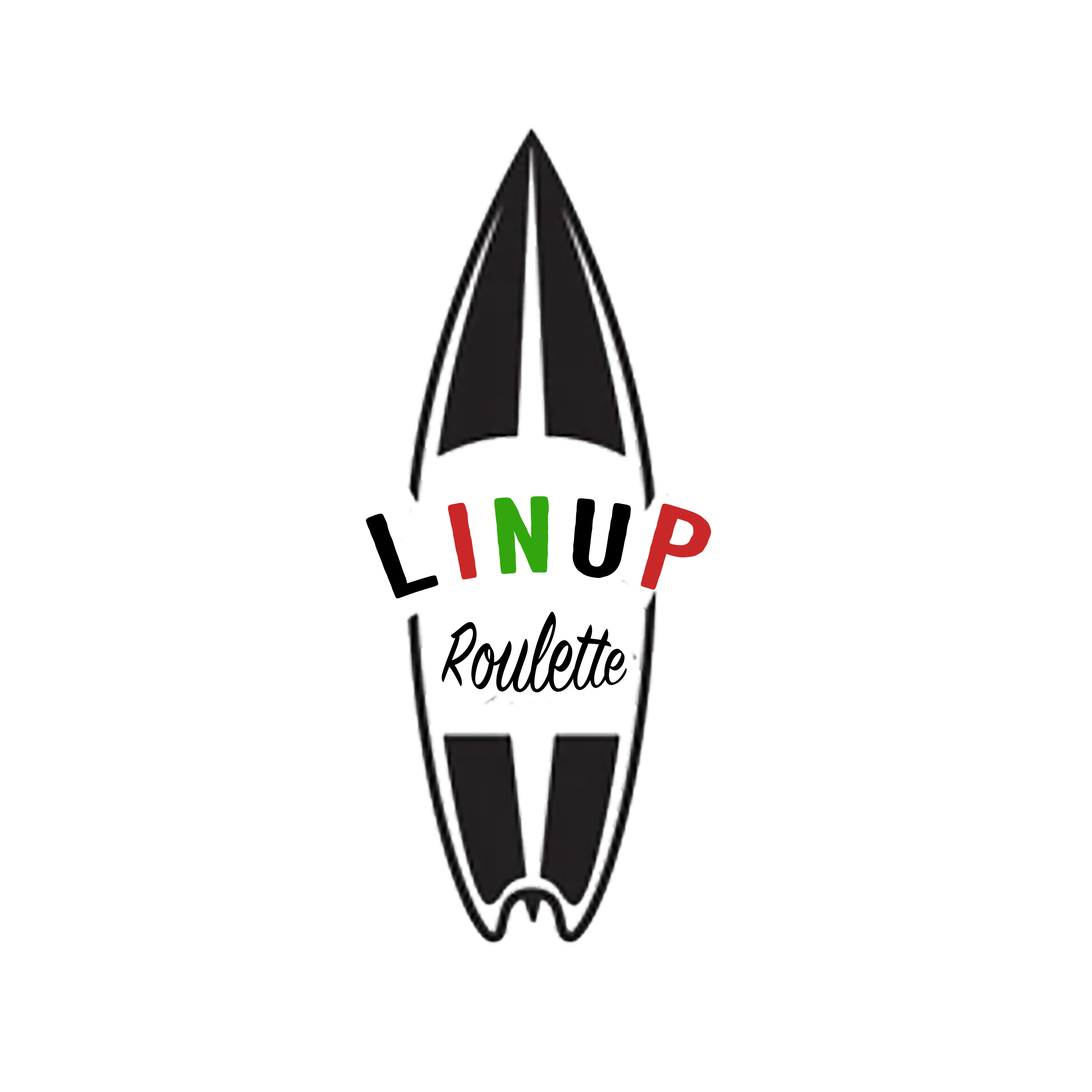
<style>
.page{position:relative;width:1092px;height:1092px;background:#ffffff}
.page>*{position:absolute;margin:0}
.t1{font:100.2px "SoltisceCoastHigh-Regular";letter-spacing:0.1em;color:#000000;scale:1.1 1}
.t2{font:100.2px "SoltisceCoastHigh-Regular";letter-spacing:0.1em;color:#ca2828;scale:1.1 1}
.t3{font:100.2px "SoltisceCoastHigh-Regular";letter-spacing:0.1em;color:#33a60f;scale:1.1 1}
.t4{font:73.2px "SignPainter-HouseScript";color:#000000}
</style>
<div class="page">
<p class="t1" style="left:366px;top:496px;width:345px;height:102px">L<span class="t2">i</span><span class="t3">n</span>u<span class="t2">P</span></p>
<p class="t4" style="left:442px;top:612px;width:185px;height:81px">Roulette</p>
</div>
